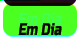
<style>
.page{position:relative;width:80px;height:40px;background:#4bff20}
.page>*{position:absolute;margin:0}
.t1{font:16.7px "RussoOne-Regular";letter-spacing:-0.01em;font-style:italic;scale:0.75 1}
</style>
<div class="page">
<p class="t1" style="left:18px;top:14px;width:44px;height:13px">Em Dia</p>
</div>
